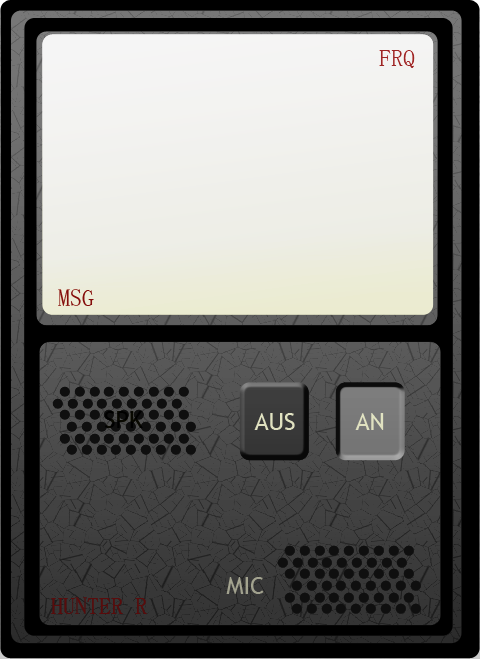
<style>
.page{position:relative;width:480px;height:659px}
.page>*{position:absolute;margin:0}
.t1{font:24px "NSimSun";color:#9c2626}
.t2{font:24px "NSimSun";color:#7a2020}
.t3{font:24px "TrebuchetMS";color:#000000}
.t4{font:24px "TrebuchetMS";color:#cbccb4}
.t5{font:24px "TrebuchetMS";color:#adad9f}
.t6{font:24px "NSimSun";color:#590c0c}
</style>
<div class="page">
<p class="t1" style="left:379px;top:50px;width:36px;height:18px">FRQ</p>
<p class="t2" style="left:58px;top:289px;width:36px;height:17px">MSG</p>
<p class="t3" style="left:104px;top:411px;width:39px;height:17px">SPK</p>
<p class="t4" style="left:254px;top:413px;width:41px;height:17px">AUS</p>
<p class="t4" style="left:355px;top:413px;width:29px;height:17px">AN</p>
<p class="t5" style="left:226px;top:577px;width:38px;height:17px">MIC</p>
<p class="t6" style="left:51px;top:597px;width:96px;height:17px">HUNTER R</p>
</div>
